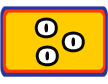
<style>
.page{position:relative;width:108px;height:84px;background:#ffcc00}
.page>*{position:absolute;margin:0}
.t1{font:29.4px "WendyOne-Regular";color:#ffffff;scale:1.09 1}
</style>
<div class="page">
<p class="t1" style="left:37px;top:20px;width:18px;height:16px">o</p>
<p class="t1" style="left:64px;top:34px;width:18px;height:16px">o</p>
<p class="t1" style="left:38px;top:48px;width:18px;height:16px">o</p>
</div>
